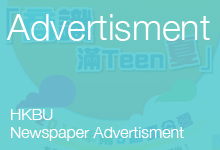
<style>
.page{position:relative;width:220px;height:150px}
.page>*{position:absolute;margin:0}
.t1{font:36px "HelveticaNeue-Light";color:#ffffff}
.t2{font:16px/18px "HelveticaNeue-Light";color:#ffffff}
</style>
<div class="page">
<p class="t1" style="left:6px;top:14px;width:204px;height:27px">Advertisment</p>
<p class="t2" style="left:11px;top:109px;width:173px;height:32px">HKBU<br>Newspaper Advertisment</p>
</div>
